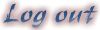
<style>
.page{position:relative;width:100px;height:30px}
.page>*{position:absolute;margin:0}
.t1{font:27.8px "RuachLetPlain";letter-spacing:0.05em;color:#2f5789}
</style>
<div class="page">
<p class="t1" style="left:3px;top:3px;width:95px;height:25px">Log out</p>
</div>
